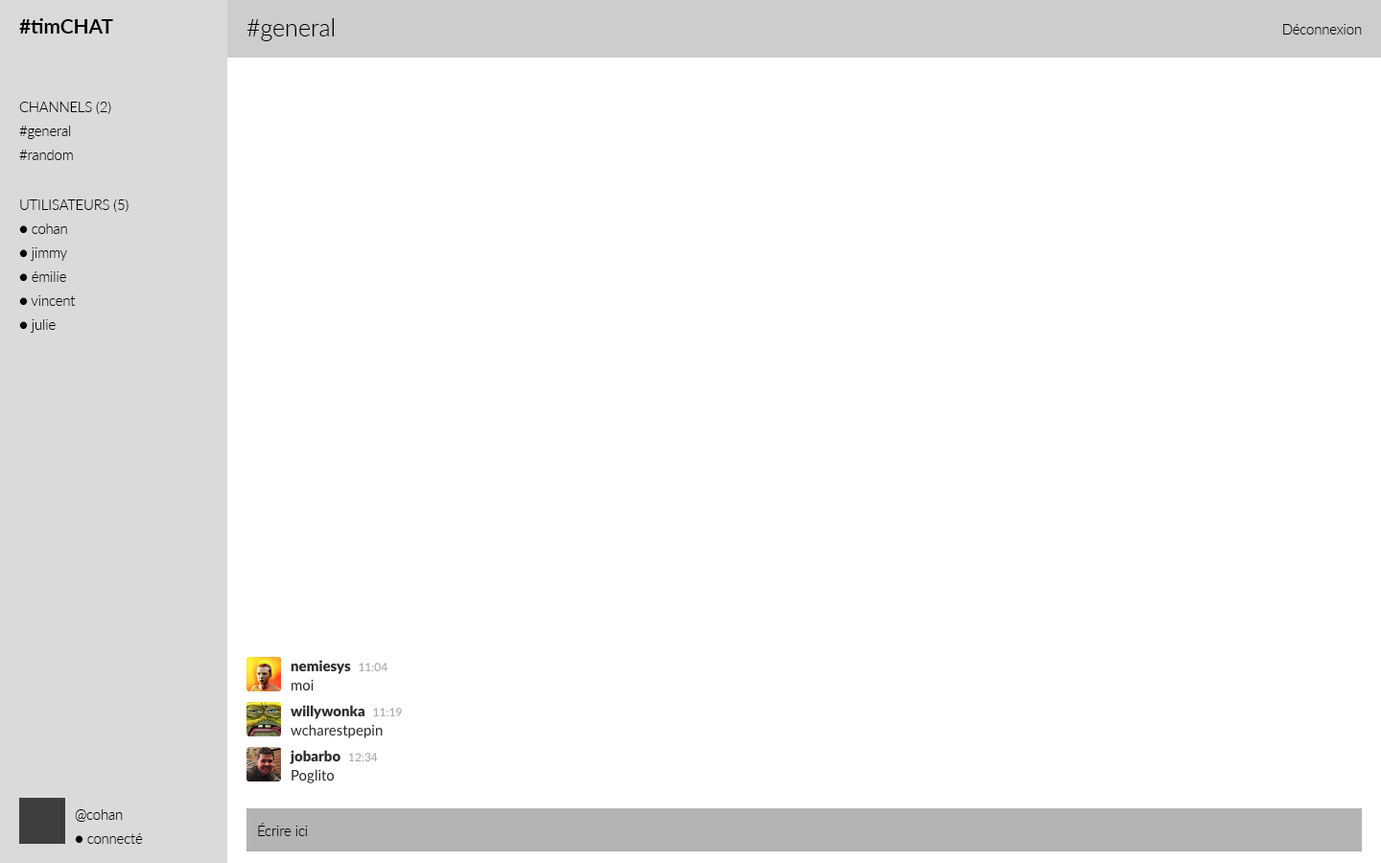
<style>
.page{position:relative;width:1381px;height:863px;background:#ffffff}
.page>*{position:absolute;margin:0}
.t1{font:20px "Lato-Bold";color:#000000}
.t2{font:24px "Lato-Light";color:#000000}
.t3{font:14px "Lato-Light";color:#000000}
.t4{font:14px/24px "Lato-Light";color:#000000}
</style>
<div class="page">
<p class="t1" style="left:19px;top:18px;width:94px;height:16px">#timCHAT</p>
<p class="t2" style="left:247px;top:18px;width:87px;height:23px">#general</p>
<p class="t3" style="left:1283px;top:24px;width:79px;height:11px">Déconnexion</p>
<p class="t4" style="left:19px;top:102px;width:92px;height:58px">CHANNELS (2)<br>#general<br>#random</p>
<p class="t4" style="left:19px;top:200px;width:110px;height:133px">UTILISATEURS (5)<br>● cohan<br>● jimmy<br>● émilie<br>● vincent<br>● julie</p>
<p class="t4" style="left:75px;top:810px;width:68px;height:34px">@cohan<br>● connecté</p>
<p class="t3" style="left:258px;top:823px;width:50px;height:13px">Écrire ici</p>
</div>
